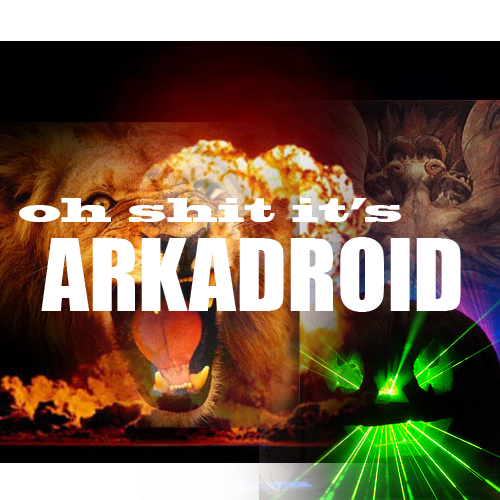
<style>
.page{position:relative;width:500px;height:500px;background:#ffffff}
.page>*{position:absolute;margin:0}
.t1{font:32px "BlackoakStd";color:#ffffff}
.t2{font:92px "Impact";color:#ffffff}
</style>
<div class="page">
<p class="t1" style="left:19px;top:198px;width:382px;height:24px">oh shit it’s</p>
<p class="t2" style="left:41px;top:237px;width:420px;height:75px">ARKADROID</p>
</div>
